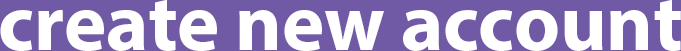
<style>
.page{position:relative;width:681px;height:51px;background:#7059a5}
.page>*{position:absolute;margin:0}
.t1{font:80px "MyriadPro-Bold";color:#ffffff}
</style>
<div class="page">
<p class="t1" style="left:0px;top:0px;width:681px;height:51px">create new account</p>
</div>
